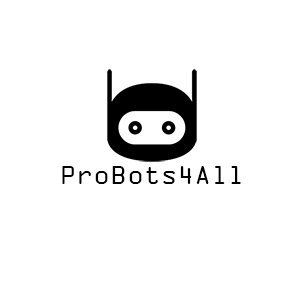
<style>
.page{position:relative;width:300px;height:300px;background:#ffffff}
.page>*{position:absolute;margin:0}
.t1{font:27.9px "OCRAExtended";color:#000000}
</style>
<div class="page">
<p class="t1" style="left:62px;top:166px;width:179px;height:18px">ProBots4All</p>
</div>
